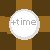
<style>
.page{position:relative;width:50px;height:50px;background:#553b12}
.page>*{position:absolute;margin:0}
.t1{font:50px "Roadgeek2005Arrows1";color:#ffffff}
.t2{font:50px "Roadgeek2005Arrows1"}
.t3{font:10px "MyriadPro-Regular";color:#b0b0b0}
</style>
<div class="page">
<p class="t1" style="left:16px;top:6px;width:17px;height:39px;rotate:90deg">}</p>
<p class="t2" style="left:6px;top:17px;width:38px;height:17px;rotate:180deg">}</p>
<p class="t3" style="left:11px;top:18px;width:25px;height:7px">+time</p>
</div>
